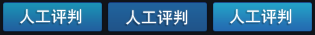
<style>
.page{position:relative;width:315px;height:35px}
.page>*{position:absolute;margin:0}
.t1{font:16px "SimHei";color:#ffffff}
</style>
<div class="page">
<p class="t1" style="left:20px;top:9px;width:62px;height:15px">人工评判</p>
<p class="t1" style="left:126px;top:10px;width:62px;height:15px">人工评判</p>
<p class="t1" style="left:230px;top:9px;width:62px;height:15px">人工评判</p>
</div>
